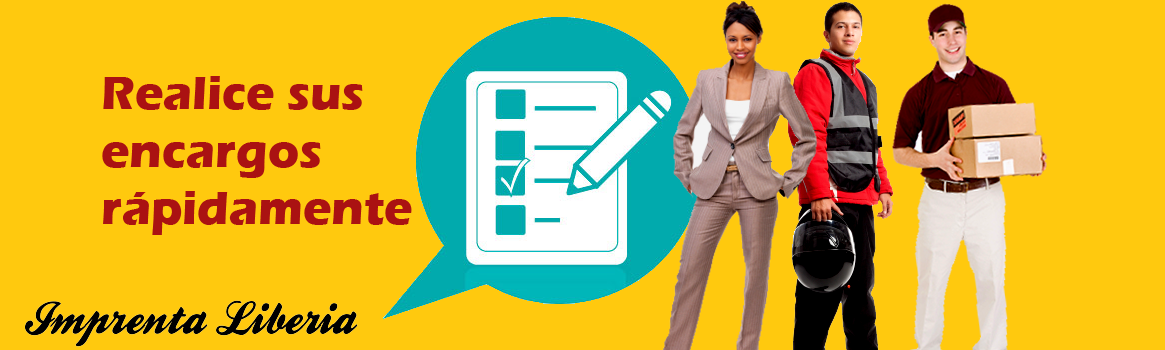
<style>
.page{position:relative;width:1165px;height:350px;background:#ffc90e}
.page>*{position:absolute;margin:0}
.t1{font:48px "ErasITC-Bold";color:#aa1212}
</style>
<div class="page">
<p class="t1" style="left:102px;top:76px;width:310px;height:159px">Realice sus encargos rápidamente</p>
</div>
